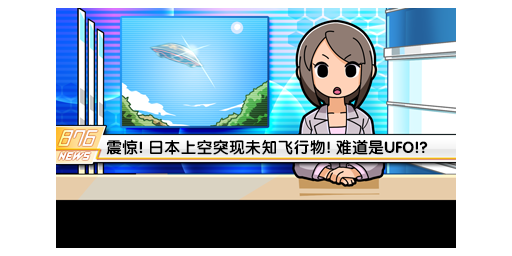
<style>
.page{position:relative;width:512px;height:256px;background:#ffffff}
.page>*{position:absolute;margin:0}
.t1{font:16px "FZY4K--GBK1-0";letter-spacing:0.01em;color:#000000}
</style>
<div class="page">
<p class="t1" style="left:106px;top:139px;width:322px;height:16px">震惊! 日本上空突现未知飞行物! 难道是UFO!?</p>
</div>
